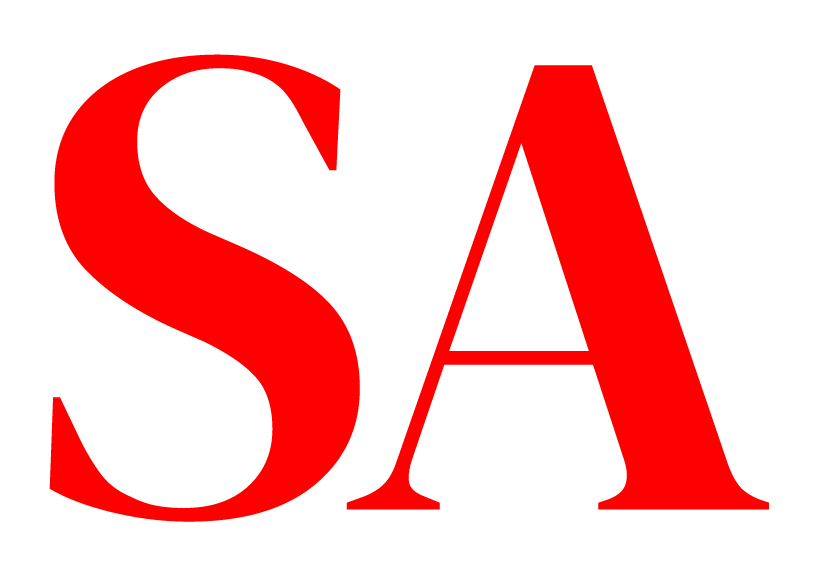
<style>
.page{position:relative;width:817px;height:578px;background:#ffffff}
.page>*{position:absolute;margin:0}
.t1{font:670.7px "DMSerifDisplay-Regular";letter-spacing:-0.03em;color:#ff0000}
</style>
<div class="page">
<p class="t1" style="left:49px;top:54px;width:720px;height:468px">SA</p>
</div>
